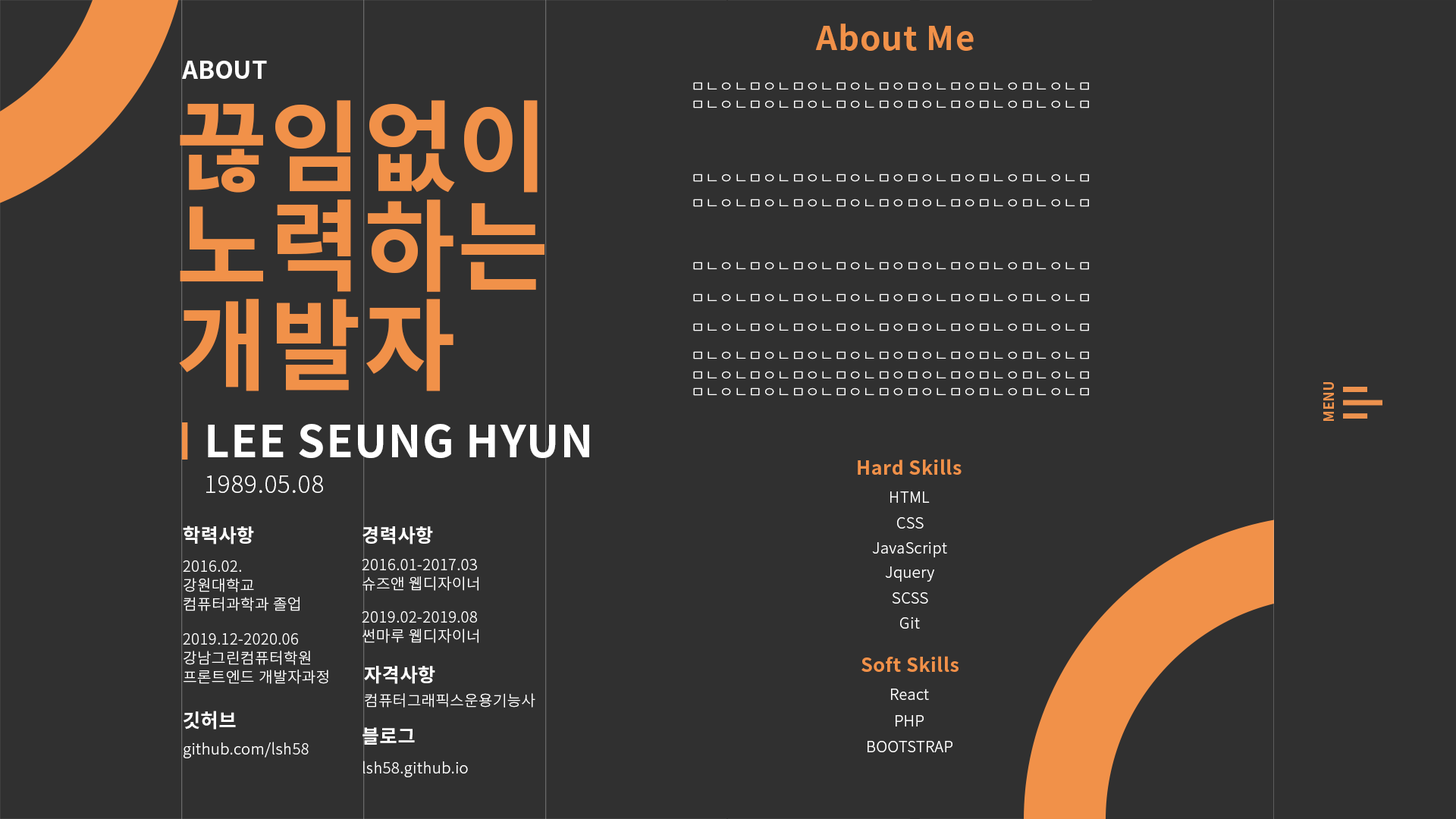
<style>
.page{position:relative;width:1456px;height:819px;background:#303030}
.page>*{position:absolute;margin:0}
.t1{font:33.1px "NotoSansKR-Bold";letter-spacing:0.025em;color:#f19149}
.t2{font:24.4px "NotoSansKR-Bold";color:#ffffff}
.t3{font:15.2px "NotoSansKR-Light";letter-spacing:0.025em;color:#ffffff}
.t4{font:99.4px/99.2px "NotoSansKR-Bold";letter-spacing:0.025em;color:#f19149}
.t5{font:13.6px "NotoSansKR-Bold";letter-spacing:0.025em;color:#f0934c}
.t6{font:43.9px "NotoSansKR-Bold";letter-spacing:0.025em;color:#ffffff}
.t7{font:19px "NotoSansKR-Bold";letter-spacing:0.025em;color:#f19149}
.t8{font:24px "NotoSansKR-Light";letter-spacing:0.025em;color:#ffffff}
.t9{font:19px "NotoSansKR-Bold";letter-spacing:0.025em;color:#ffffff}
.t10{font:15.2px/19px "NotoSansKR-Light";letter-spacing:0.025em;color:#ffffff}
</style>
<div class="page">
<p class="t1" style="left:815px;top:24px;width:159px;height:27px">About Me</p>
<p class="t2" style="left:182px;top:61px;width:85px;height:18px">ABOUT</p>
<p class="t3" style="left:693px;top:82px;width:396px;height:8px">ㅁㄴㅇㄴㅁㅇㄴㅁㅇㄴㅁㅇㄴㅁㅇㅁㅇㄴㅁㅇㅁㄴㅇㅁㄴㅇㄴㅁ</p>
<p class="t4" style="left:179px;top:100px;width:365px;height:291px">끊임없이<br>노력하는<br>개발자</p>
<p class="t3" style="left:693px;top:100px;width:396px;height:8px">ㅁㄴㅇㄴㅁㅇㄴㅁㅇㄴㅁㅇㄴㅁㅇㅁㅇㄴㅁㅇㅁㄴㅇㅁㄴㅇㄴㅁ</p>
<p class="t3" style="left:693px;top:174px;width:396px;height:8px">ㅁㄴㅇㄴㅁㅇㄴㅁㅇㄴㅁㅇㄴㅁㅇㅁㅇㄴㅁㅇㅁㄴㅇㅁㄴㅇㄴㅁ</p>
<p class="t3" style="left:693px;top:199px;width:396px;height:8px">ㅁㄴㅇㄴㅁㅇㄴㅁㅇㄴㅁㅇㄴㅁㅇㅁㅇㄴㅁㅇㅁㄴㅇㅁㄴㅇㄴㅁ</p>
<p class="t3" style="left:693px;top:262px;width:396px;height:8px">ㅁㄴㅇㄴㅁㅇㄴㅁㅇㄴㅁㅇㄴㅁㅇㅁㅇㄴㅁㅇㅁㄴㅇㅁㄴㅇㄴㅁ</p>
<p class="t3" style="left:693px;top:293px;width:396px;height:9px">ㅁㄴㅇㄴㅁㅇㄴㅁㅇㄴㅁㅇㄴㅁㅇㅁㅇㄴㅁㅇㅁㄴㅇㅁㄴㅇㄴㅁ</p>
<p class="t3" style="left:693px;top:323px;width:396px;height:8px">ㅁㄴㅇㄴㅁㅇㄴㅁㅇㄴㅁㅇㄴㅁㅇㅁㅇㄴㅁㅇㅁㄴㅇㅁㄴㅇㄴㅁ</p>
<p class="t3" style="left:693px;top:351px;width:396px;height:8px">ㅁㄴㅇㄴㅁㅇㄴㅁㅇㄴㅁㅇㄴㅁㅇㅁㅇㄴㅁㅇㅁㄴㅇㅁㄴㅇㄴㅁ</p>
<p class="t3" style="left:693px;top:371px;width:396px;height:8px">ㅁㄴㅇㄴㅁㅇㄴㅁㅇㄴㅁㅇㄴㅁㅇㅁㅇㄴㅁㅇㅁㄴㅇㅁㄴㅇㄴㅁ</p>
<p class="t3" style="left:693px;top:388px;width:396px;height:8px">ㅁㄴㅇㄴㅁㅇㄴㅁㅇㄴㅁㅇㄴㅁㅇㅁㅇㄴㅁㅇㅁㄴㅇㅁㄴㅇㄴㅁ</p>
<p class="t5" style="left:1323px;top:382px;width:11px;height:39px;rotate:-90deg">MENU</p>
<p class="t6" style="left:208px;top:424px;width:381px;height:34px">LEE SEUNG HYUN</p>
<p class="t7" style="left:858px;top:459px;width:104px;height:16px">Hard Skills</p>
<p class="t8" style="left:206px;top:475px;width:117px;height:18px">1989.05.08</p>
<p class="t3" style="left:890px;top:491px;width:40px;height:12px">HTML</p>
<p class="t3" style="left:897px;top:517px;width:27px;height:12px">CSS</p>
<p class="t9" style="left:183px;top:526px;width:71px;height:18px">학력사항</p>
<p class="t9" style="left:362px;top:526px;width:71px;height:18px">경력사항</p>
<p class="t3" style="left:872px;top:541px;width:75px;height:16px">JavaScript</p>
<p class="t10" style="left:183px;top:560px;width:117px;height:51px">2016.02.<br>강원대학교<br>컴퓨터과학과 졸업</p>
<p class="t10" style="left:362px;top:559px;width:117px;height:32px">2016.01-2017.03<br>슈즈앤 웹디자이너</p>
<p class="t3" style="left:885px;top:566px;width:49px;height:16px">Jquery</p>
<p class="t3" style="left:892px;top:592px;width:36px;height:12px">SCSS</p>
<p class="t10" style="left:362px;top:611px;width:117px;height:32px">2019.02-2019.08<br>썬마루 웹디자이너</p>
<p class="t3" style="left:900px;top:617px;width:20px;height:12px">Git</p>
<p class="t10" style="left:183px;top:633px;width:145px;height:51px">2019.12-2020.06<br>강남그린컴퓨터학원<br>프론트엔드 개발자과정</p>
<p class="t9" style="left:364px;top:665px;width:71px;height:19px">자격사항</p>
<p class="t7" style="left:861px;top:656px;width:98px;height:16px">Soft Skills</p>
<p class="t3" style="left:891px;top:689px;width:38px;height:11px">React</p>
<p class="t3" style="left:365px;top:693px;width:170px;height:15px">컴퓨터그래픽스운용기능사</p>
<p class="t9" style="left:184px;top:711px;width:52px;height:19px">깃허브</p>
<p class="t3" style="left:896px;top:715px;width:28px;height:11px">PHP</p>
<p class="t9" style="left:362px;top:727px;width:53px;height:18px">블로그</p>
<p class="t3" style="left:184px;top:742px;width:125px;height:16px">github.com/lsh58</p>
<p class="t3" style="left:868px;top:741px;width:84px;height:11px">BOOTSTRAP</p>
<p class="t3" style="left:363px;top:761px;width:105px;height:16px">lsh58.github.io</p>
</div>
